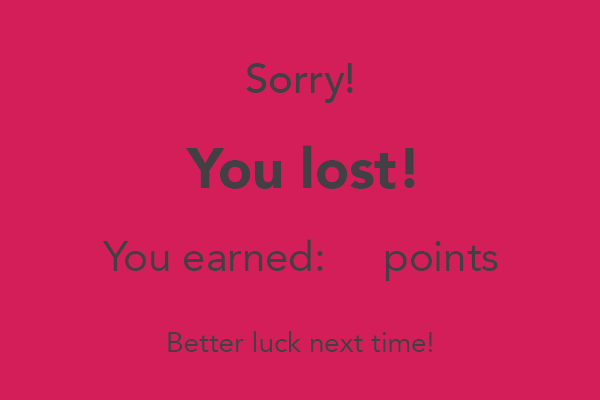
<style>
.page{position:relative;width:600px;height:400px;background:#d31e5a}
.page>*{position:absolute;margin:0}
.t1{font:41.7px "Avenir-Medium";color:#443f45}
.t2{font:55.6px "Avenir-Black";color:#443f45}
.t3{font:41.7px "Avenir-Roman";color:#443f45}
.t4{font:27.8px "Avenir-Roman";color:#443f45}
</style>
<div class="page">
<p class="t1" style="left:246px;top:63px;width:107px;height:40px">Sorry!</p>
<p class="t2" style="left:185px;top:145px;width:230px;height:44px">You lost!</p>
<p class="t3" style="left:102px;top:239px;width:396px;height:42px">You earned:     points</p>
<p class="t4" style="left:168px;top:331px;width:265px;height:21px">Better luck next time!</p>
</div>
